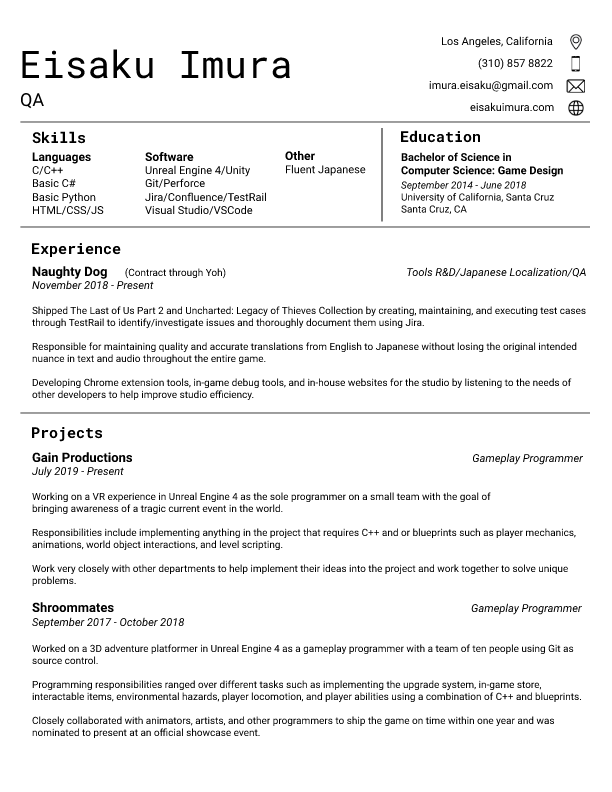
<style>
.page{position:relative;width:612px;height:792px;background:#ffffff}
.page>*{position:absolute;margin:0}
.t1{font:11px "Roboto-Regular";color:#000000}
.t2{font:38px "RobotoMono-Regular";color:#000000}
.t3{font:18px "Roboto-Regular";color:#000000}
.t4{font:15px "RobotoMono-Bold";color:#000000}
.t5{font:12px "Roboto-Bold";color:#000000}
.t6{font:11px "Roboto-Bold";color:#000000}
.t7{font:10px "Roboto-Italic";color:#000000}
.t8{font:10px "Roboto-Regular";color:#000000}
.t9{font:13px "Roboto-Bold";color:#000000}
.t10{font:11px "Roboto-Italic";color:#000000}
</style>
<div class="page">
<p class="t1" style="left:442px;top:36px;width:111px;height:12px">Los Angeles, California</p>
<p class="t2" style="left:22px;top:49px;width:268px;height:30px">Eisaku Imura</p>
<p class="t1" style="left:478px;top:58px;width:75px;height:12px">(310) 857 8822</p>
<p class="t1" style="left:429px;top:80px;width:124px;height:12px">imura.eisaku@gmail.com</p>
<p class="t3" style="left:20px;top:93px;width:24px;height:16px">QA</p>
<p class="t1" style="left:470px;top:102px;width:84px;height:9px">eisakuimura.com</p>
<p class="t4" style="left:32px;top:131px;width:53px;height:13px">Skills</p>
<p class="t4" style="left:401px;top:130px;width:79px;height:13px">Education</p>
<p class="t1" style="left:32px;top:152px;width:72px;height:63px"><span class="t5">Languages<br></span>C/C++<br>Basic C#<br>Basic Python<br>HTML/CSS/JS</p>
<p class="t1" style="left:145px;top:151px;width:121px;height:64px"><span class="t5">Software<br></span>Unreal Engine 4/Unity<br>Git/Perforce<br>Jira/Confluence/TestRail<br>Visual Studio/VSCode</p>
<p class="t1" style="left:285px;top:151px;width:81px;height:25px"><span class="t5">Other<br></span>Fluent Japanese</p>
<p class="t6" style="left:401px;top:152px;width:162px;height:63px">Bachelor of Science in <br>Computer Science: Game Design<br><span class="t7">September 2014 - June 2018<br></span><span class="t8">University of California, Santa Cruz<br>Santa Cruz, CA</span></p>
<p class="t4" style="left:32px;top:243px;width:89px;height:14px">Experience</p>
<p class="t8" style="left:32px;top:266px;width:554px;height:135px"><span class="t9">Naughty Dog     </span>(Contract through Yoh)                                                    <span class="t10">Tools R&amp;D/Japanese Localization/QA<br>November 2018 - Present<br><br></span>Shipped The Last of Us Part 2 and Uncharted: Legacy of Thieves Collection by creating, maintaining, and executing test cases <br>through TestRail to identify/investigate issues and thoroughly document them using Jira.<br><br>Responsible for maintaining quality and accurate translations from English to Japanese without losing the original intended <br>nuance in text and audio throughout the entire game.<br><br>Developing Chrome extension tools, in-game debug tools, and in-house websites for the studio by listening to the needs of <br>other developers to help improve studio efficiency.</p>
<p class="t4" style="left:32px;top:427px;width:70px;height:15px">Projects</p>
<p class="t8" style="left:32px;top:452px;width:552px;height:135px"><span class="t9">Gain Productions                                                                                                  </span><span class="t10">Gameplay Programmer<br>July 2019 - Present<br><br></span>Working on a VR experience in Unreal Engine 4 as the sole programmer on a small team with the goal of <br>bringing awareness of a tragic current event in the world.<br><br>Responsibilities include implementing anything in the project that requires C++ and or blueprints such as player mechanics, <br>animations, world object interactions, and level scripting.<br><br>Work very closely with other departments to help implement their ideas into the project and work together to solve unique<br>problems.</p>
<p class="t8" style="left:32px;top:602px;width:550px;height:137px"><span class="t9">Shroommates                                                                                                       </span><span class="t10">Gameplay Programmer<br>September 2017 - October 2018<br><br></span>Worked on a 3D adventure platformer in Unreal Engine 4 as a gameplay programmer with a team of ten people using Git as <br>source control.<br><br>Programming responsibilities ranged over different tasks such as implementing the upgrade system, in-game store, <br>interactable items, environmental hazards, player locomotion, and player abilities using a combination of C++ and blueprints.<br><br>Closely collaborated with animators, artists, and other programmers to ship the game on time within one year and was <br>nominated to present at an official showcase event.</p>
</div>
